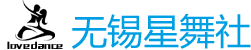
<style>
.page{position:relative;width:251px;height:50px;background:#ffffff}
.page>*{position:absolute;margin:0}
.t1{font:36px "MicrosoftYaHei";color:#009fe3}
.t2{font:7.8px "MFLiHei_Noncommercial-Regular";color:#000000}
</style>
<div class="page">
<p class="t1" style="left:71px;top:14px;width:180px;height:35px">无锡星舞社</p>
<p class="t2" style="left:7px;top:41px;width:56px;height:8px">love dance</p>
</div>
